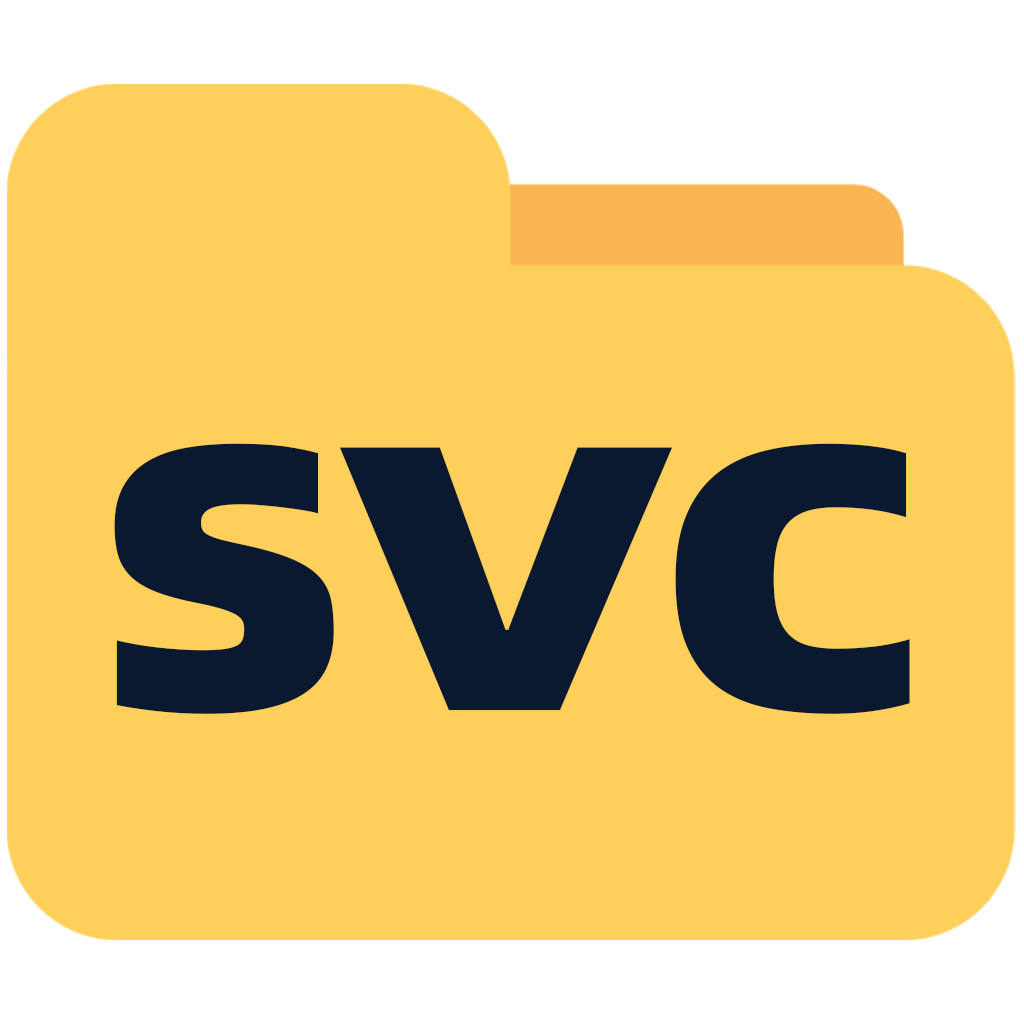
<style>
.page{position:relative;width:1024px;height:1024px;background:#ffcf5c}
.page>*{position:absolute;margin:0}
.t1{font:378.2px "AlibabaPuHuiTi_3_115_Black";letter-spacing:-0.05em;color:#0a192f;scale:1.19 1}
</style>
<div class="page">
<p class="t1" style="left:114px;top:443px;width:796px;height:271px">SVC</p>
</div>
